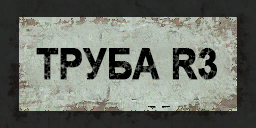
<style>
.page{position:relative;width:256px;height:128px}
.page>*{position:absolute;margin:0}
.t1{font:43px "Arial-BoldMT";letter-spacing:-0.02em;color:#000000;font-weight:bold;scale:0.87 1}
</style>
<div class="page">
<p class="t1" style="left:36px;top:48px;width:181px;height:32px">ТРУБА R3</p>
</div>
